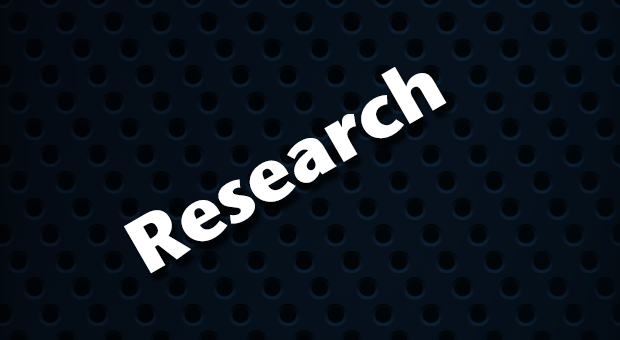
<style>
.page{position:relative;width:620px;height:340px}
.page>*{position:absolute;margin:0}
.t1{font:132px "StoneSansITC-Bold";letter-spacing:-0.01em;color:#ffffff}
</style>
<div class="page">
<p class="t1" style="left:124px;top:67px;width:323px;height:207px;rotate:-30deg">Research</p>
</div>
